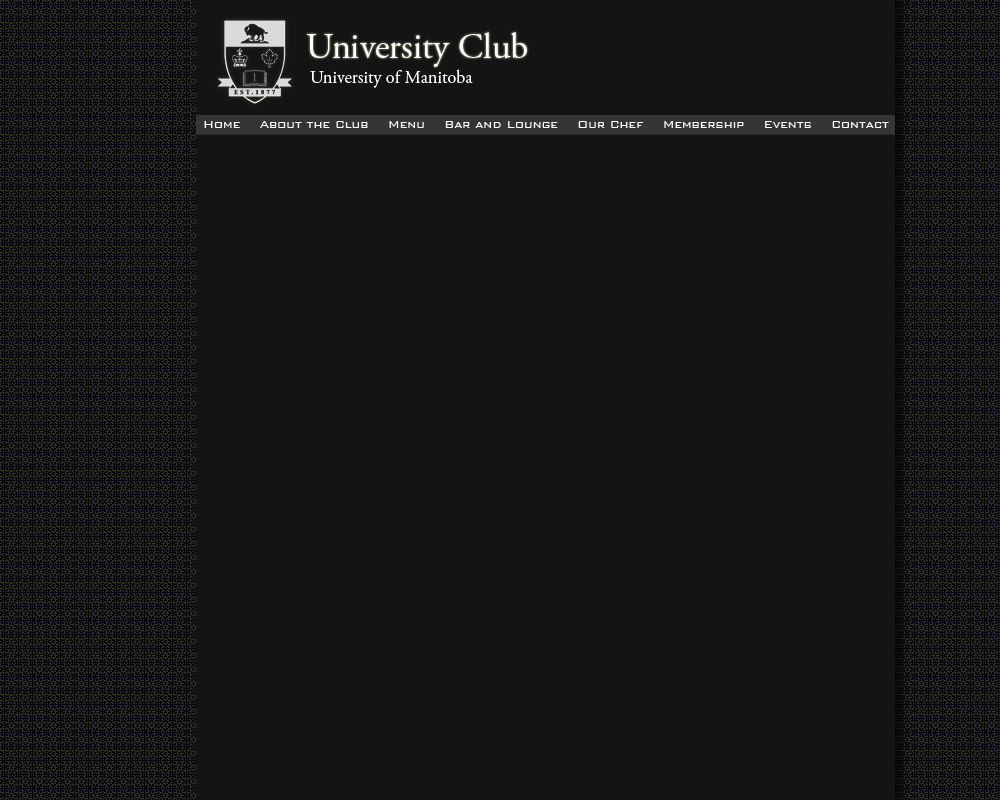
<style>
.page{position:relative;width:1000px;height:800px;background:#141414}
.page>*{position:absolute;margin:0}
.t1{font:36px "AGaramondPro-Regular";color:#ffffff}
.t2{font:18px "AGaramondPro-Regular";color:#ffffff}
.t3{font:13px "BankGothic-Light";color:#ffffff}
</style>
<div class="page">
<p class="t1" style="left:306px;top:32px;width:221px;height:35px">University Club</p>
<p class="t2" style="left:310px;top:69px;width:163px;height:19px">University of Manitoba</p>
<p class="t3" style="left:204px;top:121px;width:685px;height:7px">Home    About the Club    Menu    Bar and Lounge    Our Chef    Membership    Events    Contact</p>
</div>
